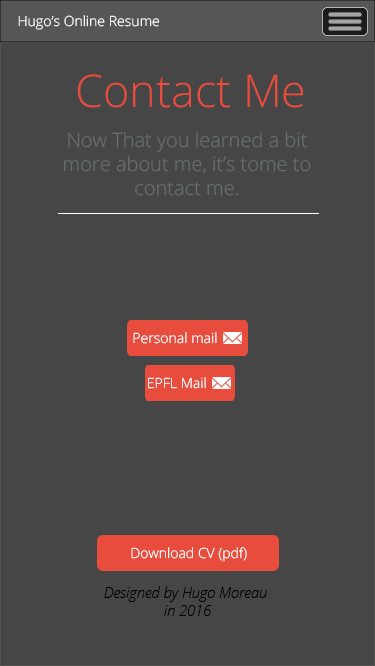
<style>
.page{position:relative;width:375px;height:666px;background:#464646}
.page>*{position:absolute;margin:0}
.t1{font:14.1px "OpenSans-Light";color:#ffffff}
.t2{font:45px "OpenSans-Light";color:#e74c3c}
.t3{font:20px "OpenSans-Light";color:#727878}
.t4{font:14.6px "OpenSansLight-Italic";color:#000000}
</style>
<div class="page">
<p class="t1" style="left:18px;top:15px;width:142px;height:15px">Hugo’s Online Resume</p>
<p class="t2" style="left:77px;top:74px;width:226px;height:34px">Contact Me</p>
<p class="t3" style="left:64px;top:131px;width:247px;height:65px;text-align:center;opacity:0.76">Now That you learned a bit more about me, it’s tome to contact me.</p>
<p class="t1" style="left:133px;top:332px;width:84px;height:12px">Personal mail</p>
<p class="t1" style="left:148px;top:377px;width:58px;height:12px">EPFL Mail</p>
<p class="t1" style="left:131px;top:547px;width:116px;height:15px">Download CV (pdf)</p>
<p class="t4" style="left:104px;top:586px;width:163px;height:30px;text-align:center">Designed by Hugo Moreau <br>in 2016</p>
</div>
